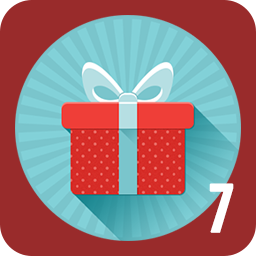
<style>
.page{position:relative;width:256px;height:256px;background:#992b2b}
.page>*{position:absolute;margin:0}
.t1{font:56.9px "FjallaOne-Regular";letter-spacing:-0.03em;color:#ffffff;text-transform:uppercase;font-weight:bold}
</style>
<div class="page">
<p class="t1" style="left:209px;top:183px;width:25px;height:50px">7</p>
</div>
